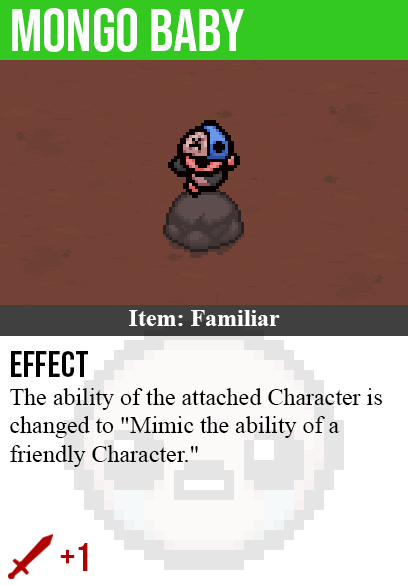
<style>
.page{position:relative;width:408px;height:585px;background:#734136}
.page>*{position:absolute;margin:0}
.t1{font:60px "BebasNeue-Regular";color:#ffffff}
.t2{font:24px "TimesNewRomanPS-BoldMT";color:#ffffff}
.t3{font:36px "BebasNeue-Regular";color:#000000}
.t4{font:24px "TimesNewRomanPSMT";color:#000000}
.t5{font:40px "BebasNeue-Regular";color:#af0202}
</style>
<div class="page">
<p class="t1" style="left:12px;top:8px;width:232px;height:44px">mongo baby</p>
<p class="t2" style="left:129px;top:310px;width:151px;height:16px">Item: Familiar</p>
<p class="t3" style="left:11px;top:351px;width:77px;height:26px">effect</p>
<p class="t4" style="left:10px;top:388px;width:372px;height:79px">The ability of the attached Character is<br>changed to "Mimic the ability of a<br>friendly Character."</p>
<p class="t5" style="left:60px;top:543px;width:28px;height:28px">+1</p>
</div>
